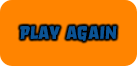
<style>
.page{position:relative;width:137px;height:66px;background:#ff8400}
.page>*{position:absolute;margin:0}
.t1{font:18px "OrgovanBrush";color:#0b5394}
</style>
<div class="page">
<p class="t1" style="left:20px;top:26px;width:97px;height:15px">play again</p>
</div>
